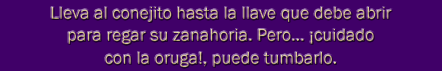
<style>
.page{position:relative;width:442px;height:71px;background:#400068}
.page>*{position:absolute;margin:0}
.t1{font:18px/22.2px "FranklinGothic-Book";color:#d4c088}
</style>
<div class="page">
<p class="t1" style="left:51px;top:7px;width:341px;height:61px;text-align:center">Lleva al conejito hasta la llave que debe abrir <br>para regar su zanahoria. Pero... ¡cuidado <br>con la oruga!, puede tumbarlo.</p>
</div>
